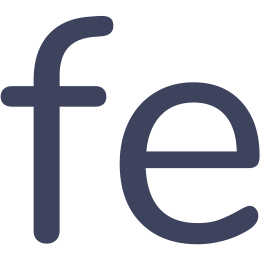
<style>
.page{position:relative;width:260px;height:260px;background:#ffffff}
.page>*{position:absolute;margin:0}
.t1{font:320px "Nunito-Regular";color:#3d425d}
</style>
<div class="page">
<p class="t1" style="left:0px;top:15px;width:260px;height:230px">fe</p>
</div>
